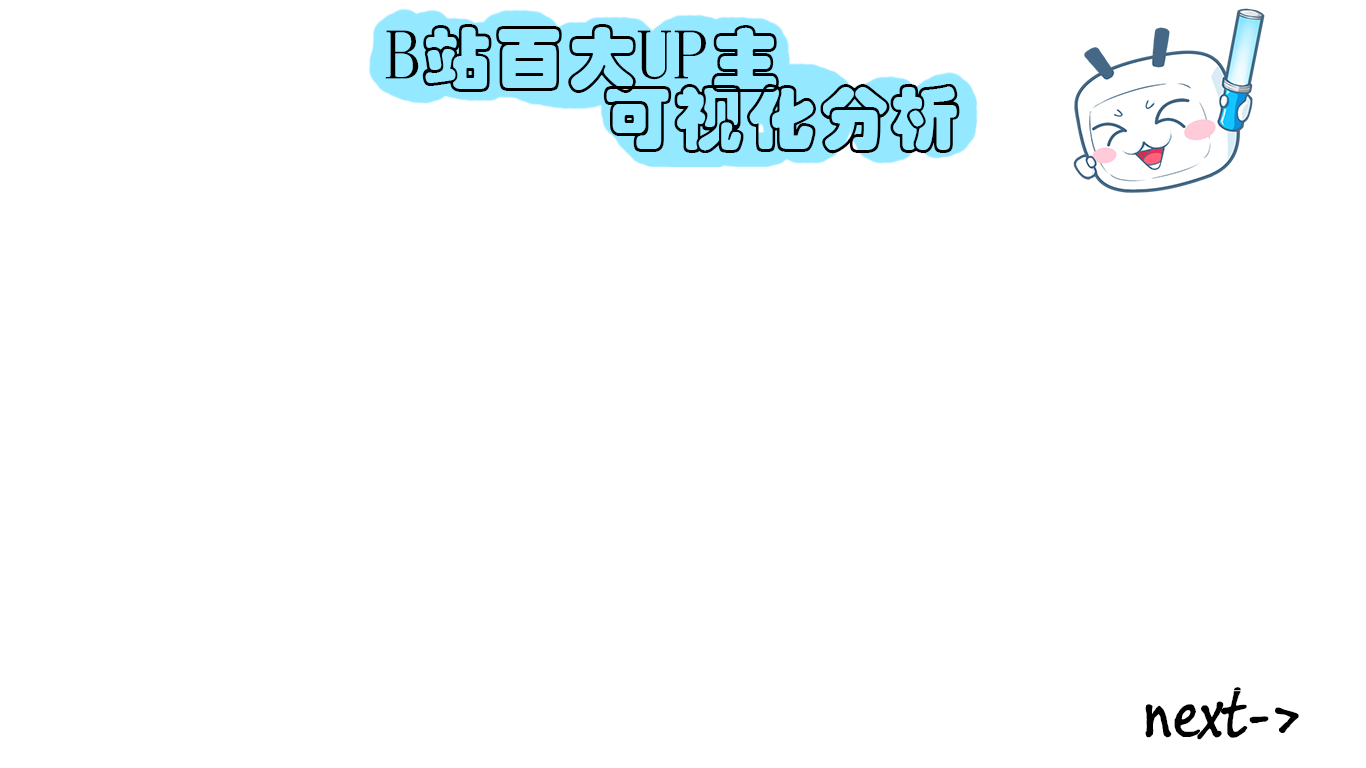
<style>
.page{position:relative;width:1366px;height:768px;background:#ffffff}
.page>*{position:absolute;margin:0}
.t1{font:72px/60px "STCaiyun";color:#000000}
.t2{font:72px/60px "SimSun-ExtB";color:#000000}
.t3{font:72px "BuxtonSketch";color:#000000}
</style>
<div class="page">
<p class="t1" style="left:385px;top:24px;width:575px;height:130px"><span class="t2">B</span>站百大<span class="t2">UP</span>主<br>      可视化分析</p>
<p class="t3" style="left:1145px;top:687px;width:154px;height:53px">next-&gt;</p>
</div>
